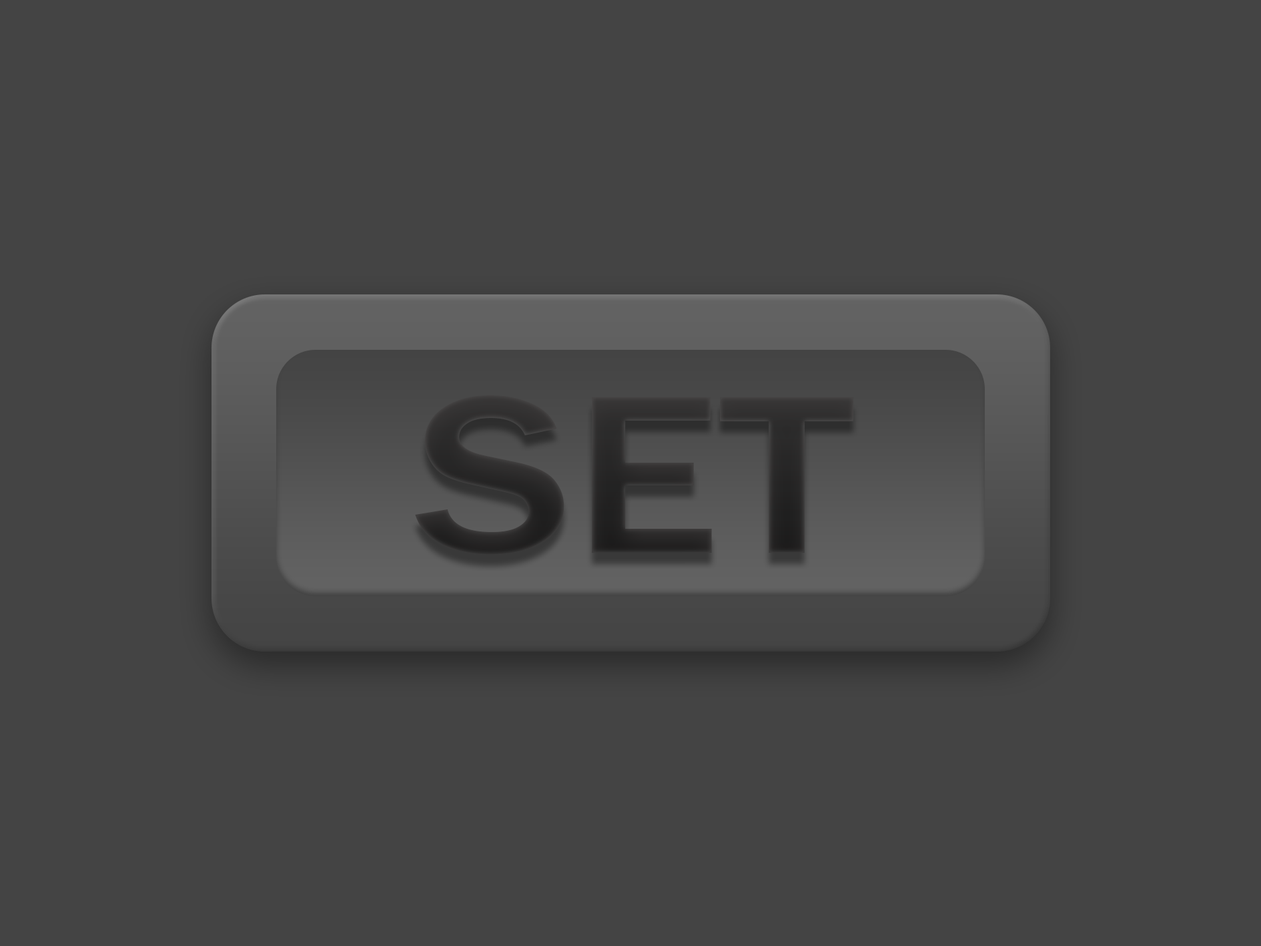
<style>
.page{position:relative;width:1261px;height:946px;background:#444444}
.page>*{position:absolute;margin:0}
.t1{font:233.4px "FranklinGothic-Medium";color:#2d2c2c;scale:1.18 1}
</style>
<div class="page">
<p class="t1" style="left:415px;top:395px;width:439px;height:160px">SET</p>
</div>
